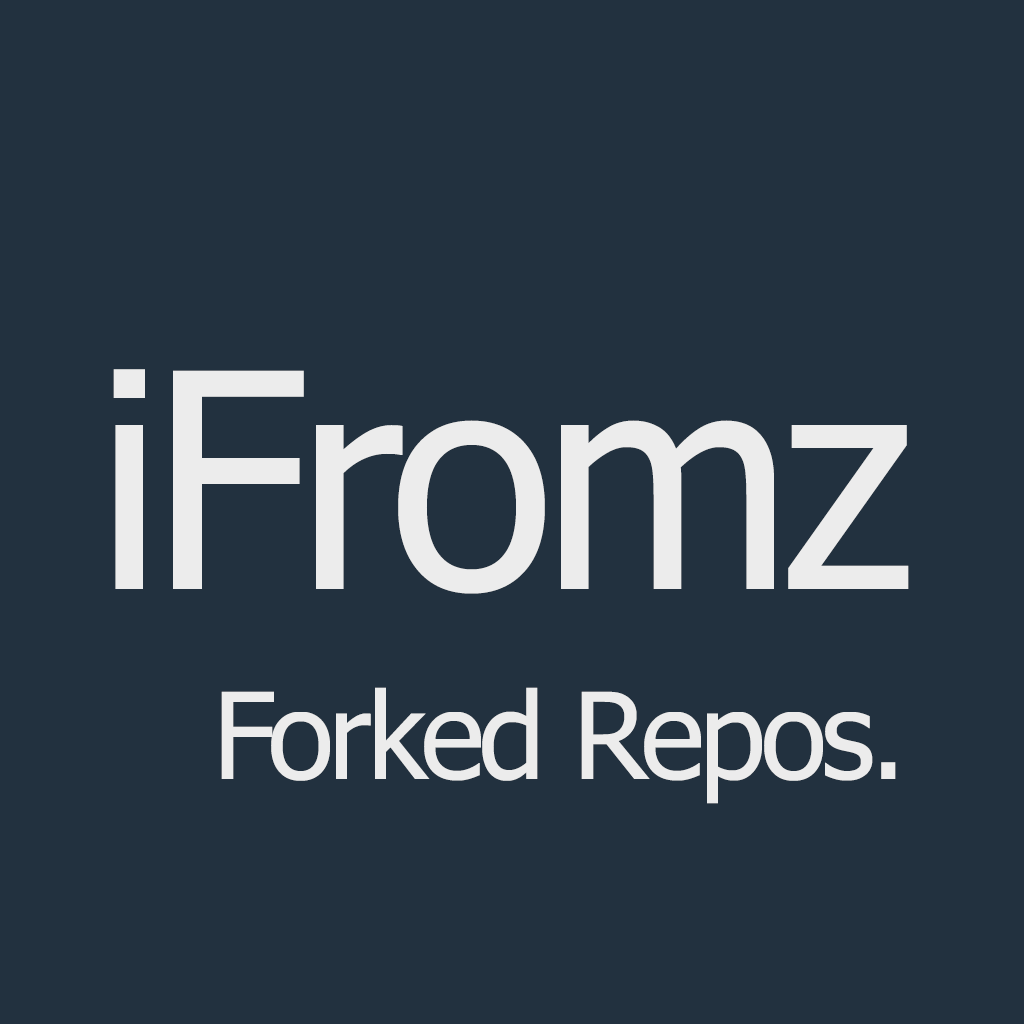
<style>
.page{position:relative;width:1024px;height:1024px;background:#22313f}
.page>*{position:absolute;margin:0}
.t1{font:300px "Tahoma";letter-spacing:-0.04em;color:#ececec}
.t2{font:120px "Tahoma";letter-spacing:-0.04em;color:#ececec}
</style>
<div class="page">
<p class="t1" style="left:113px;top:369px;width:796px;height:225px">iFromz</p>
<p class="t2" style="left:221px;top:687px;width:675px;height:117px">Forked Repos.</p>
</div>
